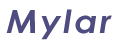
<style>
.page{position:relative;width:115px;height:40px;background:#ffffff}
.page>*{position:absolute;margin:0}
.t1{font:32px "CenturyGothic-BoldItalic";letter-spacing:0.075em;color:#4f4c81;scale:1.1 1}
</style>
<div class="page">
<p class="t1" style="left:6px;top:9px;width:106px;height:31px">Mylar</p>
</div>
